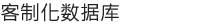
<style>
.page{position:relative;width:200px;height:25px;background:#ffffff}
.page>*{position:absolute;margin:0}
.t1{font:20px "MicrosoftJhengHeiRegular";color:#222222}
</style>
<div class="page">
<p class="t1" style="left:1px;top:3px;width:118px;height:19px">客制化数据库</p>
</div>
